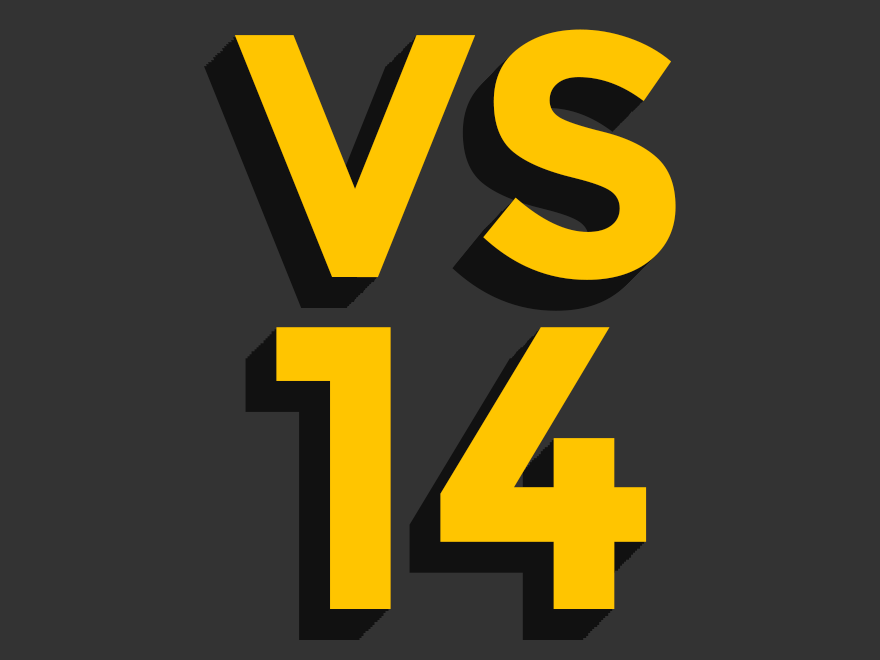
<style>
.page{position:relative;width:880px;height:660px;background:#333333}
.page>*{position:absolute;margin:0}
.t1{font:345.7px/331.9px "Montserrat-Bold";color:#ffc500}
.t2{font:403.3px/331.9px "Montserrat-Bold";color:#ffc500;text-transform:uppercase}
.t3{font:345.7px/331.9px "Montserrat-Bold"}
.t4{font:403.3px/331.9px "Montserrat-Bold";text-transform:uppercase}
</style>
<div class="page">
<p class="t1" style="left:234px;top:29px;width:442px;height:580px;text-align:center">VS<br><span class="t2">14</span></p>
<p class="t1" style="left:234px;top:29px;width:442px;height:580px;text-align:center">VS<br><span class="t2">14</span></p>
<p class="t1" style="left:223px;top:40px;width:442px;height:580px;text-align:center">VS<br><span class="t2">14</span></p>
<p class="t1" style="left:225px;top:38px;width:442px;height:580px;text-align:center">VS<br><span class="t2">14</span></p>
<p class="t1" style="left:227px;top:36px;width:442px;height:580px;text-align:center">VS<br><span class="t2">14</span></p>
<p class="t1" style="left:230px;top:34px;width:441px;height:579px;text-align:center">VS<br><span class="t2">14</span></p>
<p class="t1" style="left:232px;top:31px;width:442px;height:580px;text-align:center">VS<br><span class="t2">14</span></p>
<p class="t3" style="left:210px;top:54px;width:441px;height:579px;text-align:center">VS<br><span class="t4">14</span></p>
<p class="t3" style="left:212px;top:51px;width:442px;height:580px;text-align:center">VS<br><span class="t4">14</span></p>
<p class="t3" style="left:214px;top:49px;width:442px;height:580px;text-align:center">VS<br><span class="t4">14</span></p>
<p class="t3" style="left:216px;top:47px;width:442px;height:580px;text-align:center">VS<br><span class="t4">14</span></p>
<p class="t1" style="left:219px;top:45px;width:441px;height:580px;text-align:center">VS<br><span class="t2">14</span></p>
<p class="t1" style="left:221px;top:42px;width:441px;height:580px;text-align:center">VS<br><span class="t2">14</span></p>
<p class="t3" style="left:203px;top:60px;width:442px;height:580px;text-align:center">VS<br><span class="t4">14</span></p>
<p class="t3" style="left:205px;top:58px;width:442px;height:580px;text-align:center">VS<br><span class="t4">14</span></p>
<p class="t3" style="left:207px;top:56px;width:442px;height:580px;text-align:center">VS<br><span class="t4">14</span></p>
</div>
